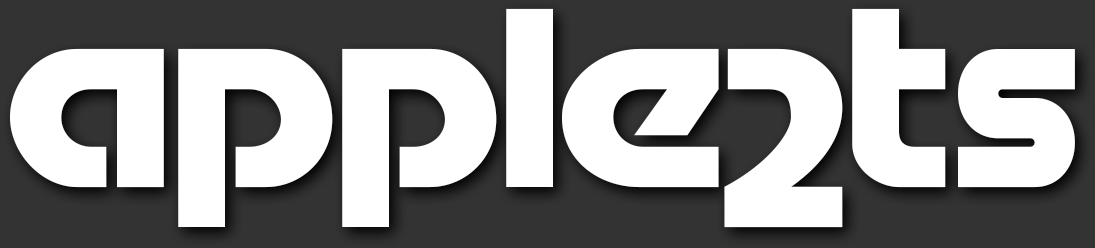
<style>
.page{position:relative;width:1095px;height:248px;background:#ffffff}
.page>*{position:absolute;margin:0}
.t1{font:223px "MotterTekturaRetro";color:#ffffff}
</style>
<div class="page">
<p class="t1" style="left:10px;top:8px;width:1065px;height:220px">apple2ts</p>
</div>
